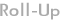
<style>
.page{position:relative;width:60px;height:20px;background:#ffffff}
.page>*{position:absolute;margin:0}
.t1{font:15.9px "ArchitecturePlain";color:#aaaaaa;scale:1.8 1}
</style>
<div class="page">
<p class="t1" style="left:0px;top:2px;width:60px;height:18px">Roll-Up</p>
</div>
